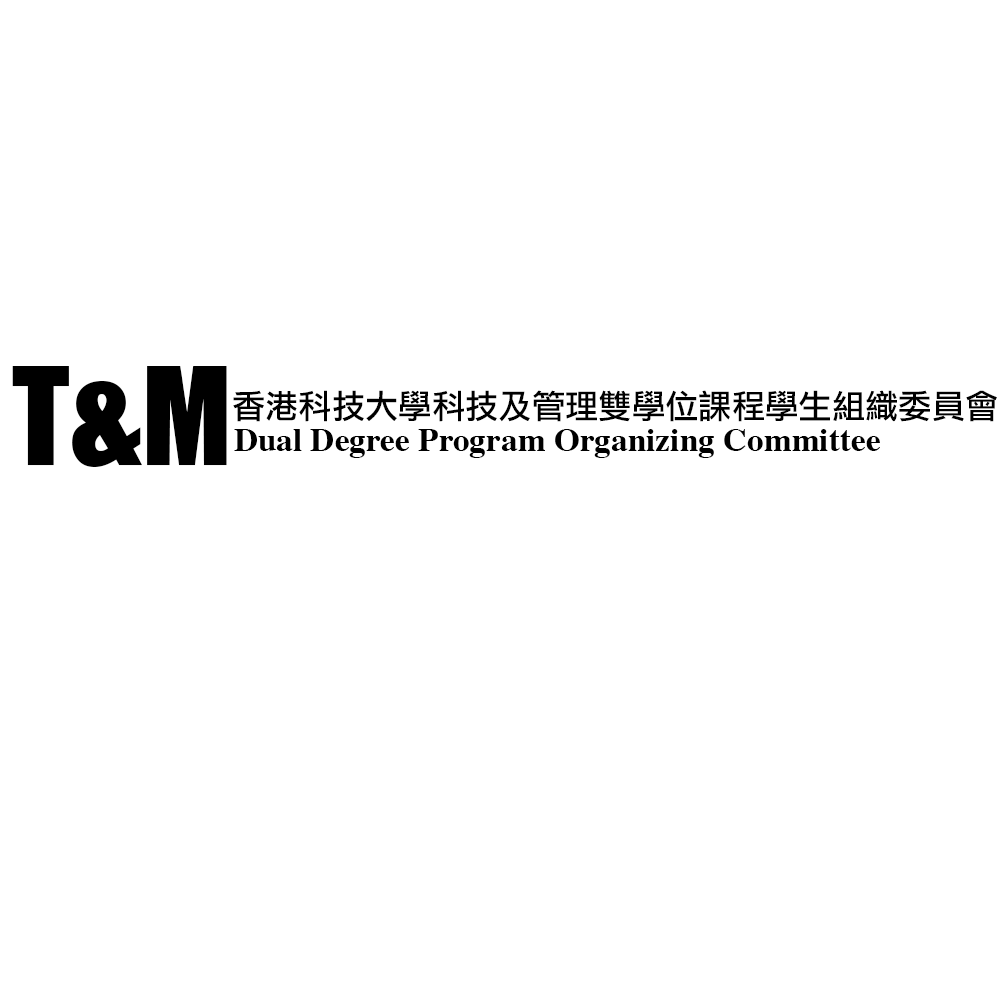
<style>
.page{position:relative;width:1000px;height:1000px;background:#ffffff}
.page>*{position:absolute;margin:0}
.t1{font:125px "Impact";color:#000000}
.t2{font:33.3px "LiGothicMed";color:#000000}
.t3{font:33.3px "Times-Bold";color:#000000}
</style>
<div class="page">
<p class="t1" style="left:12px;top:366px;width:215px;height:101px">T&amp;M</p>
<p class="t2" style="left:233px;top:390px;width:764px;height:32px">香港科技大學科技及管理雙學位課程學生組織委員會</p>
<p class="t3" style="left:234px;top:429px;width:646px;height:29px">Dual Degree Program Organizing Committee</p>
</div>
